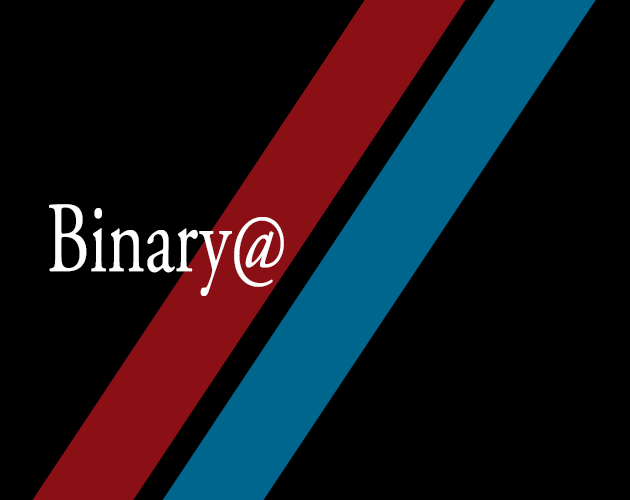
<style>
.page{position:relative;width:630px;height:500px;background:#000000}
.page>*{position:absolute;margin:0}
.t1{font:100.8px "AGaramondPro-Regular";color:#fefefe;scale:0.71 1}
</style>
<div class="page">
<p class="t1" style="left:49px;top:204px;width:235px;height:92px">Binary@</p>
</div>
